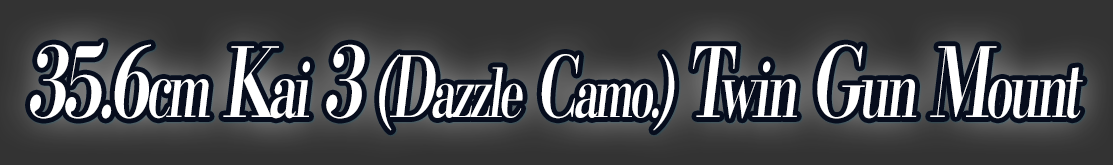
<style>
.page{position:relative;width:1113px;height:165px}
.page>*{position:absolute;margin:0}
.t1{font:67.2px "KochoStd-Heavy";letter-spacing:-0.08em;color:#ffffff;font-style:italic;scale:0.67 1}
.t2{font:96px "KochoStd-Heavy";letter-spacing:-0.08em;color:#ffffff;font-style:italic;scale:0.67 1}
.t3{font:76.8px "KochoStd-Heavy";letter-spacing:-0.08em;color:#ffffff;font-style:italic;scale:0.67 1}
.t4{font:84px "KochoStd-Heavy";letter-spacing:-0.08em;color:#ffffff;font-style:italic;scale:0.67 1}
</style>
<div class="page">
<p class="t1" style="left:30px;top:42px;width:1053px;height:89px"><span class="t2">35.6</span><span class="t3">cm </span><span class="t2">K</span><span class="t3">ai</span><span class="t2"> 3 </span><span class="t4">(D</span>azzle <span class="t4">C</span>amo.<span class="t4">)</span><span class="t2"> T</span><span class="t3">win</span><span class="t2"> G</span><span class="t3">un</span><span class="t2"> M</span><span class="t3">ount</span></p>
</div>
